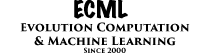
<style>
.page{position:relative;width:202px;height:56px;background:#ffffff}
.page>*{position:absolute;margin:0}
.t1{font:11.4px "TrajanPro3-Bold";color:#000000}
.t2{font:21.7px "MarkerFelt-Wide";color:#000000}
.t3{font:10.4px "TrajanPro3-Bold";color:#000000}
.t4{font:6.7px "TrajanPro3-Bold";color:#000000}
</style>
<div class="page">
<p class="t1" style="left:20px;top:0px;width:170px;height:53px;text-align:center"><span class="t2">ECML <br></span><span class="t3">E</span>volution Computation<br>&amp; Machine Learning<br><span class="t4">Since 2000</span></p>
</div>
